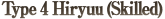
<style>
.page{position:relative;width:165px;height:19px;background:#ffffff}
.page>*{position:absolute;margin:0}
.t1{font:18px "RyuminPro-ExBold";letter-spacing:-0.08em;color:#4a3f32;font-weight:bold;scale:0.9 1}
</style>
<div class="page">
<p class="t1" style="left:1px;top:1px;width:162px;height:18px">Type 4 Hiryuu (Skilled)</p>
</div>
